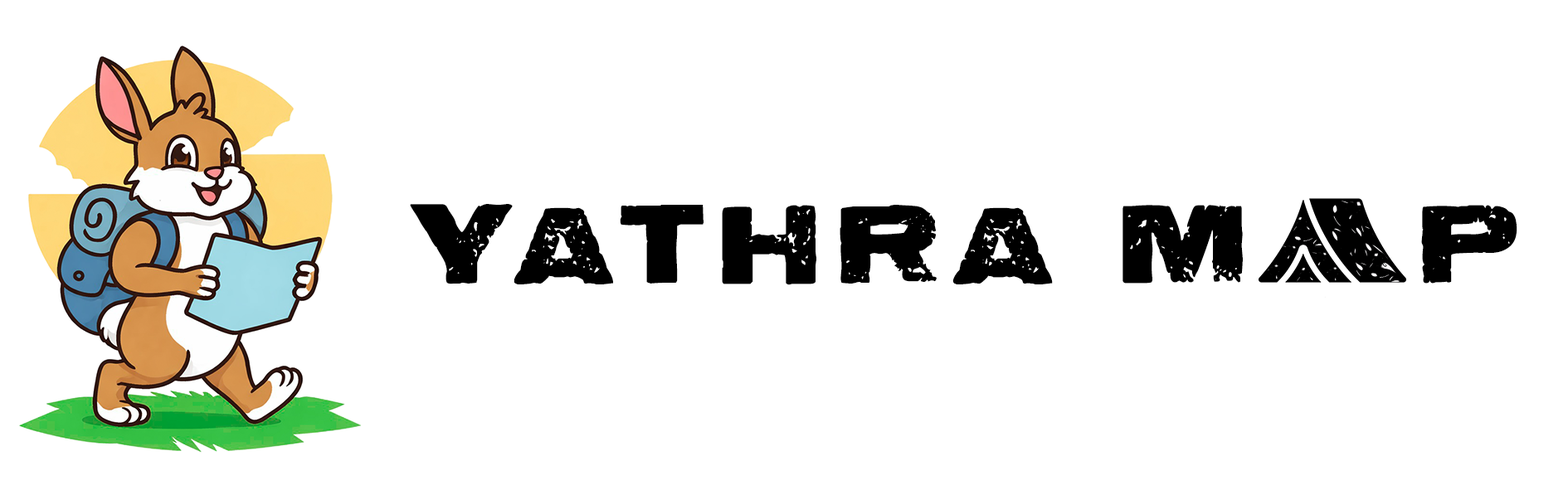
<style>
.page{position:relative;width:1568px;height:490px;background:#ffffff}
.page>*{position:absolute;margin:0}
.t1{font:96.8px "LetterpressAurora";letter-spacing:0.135em;color:#000000}
</style>
<div class="page">
<p class="t1" style="left:410px;top:204px;width:1107px;height:81px">YATHRA M   P</p>
</div>
